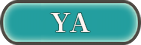
<style>
.page{position:relative;width:141px;height:45px;background:#239e9f}
.page>*{position:absolute;margin:0}
.t1{font:26px "RyuminPro-ExBold";color:#fff6f3}
</style>
<div class="page">
<p class="t1" style="left:50px;top:13px;width:40px;height:19px">YA</p>
</div>
